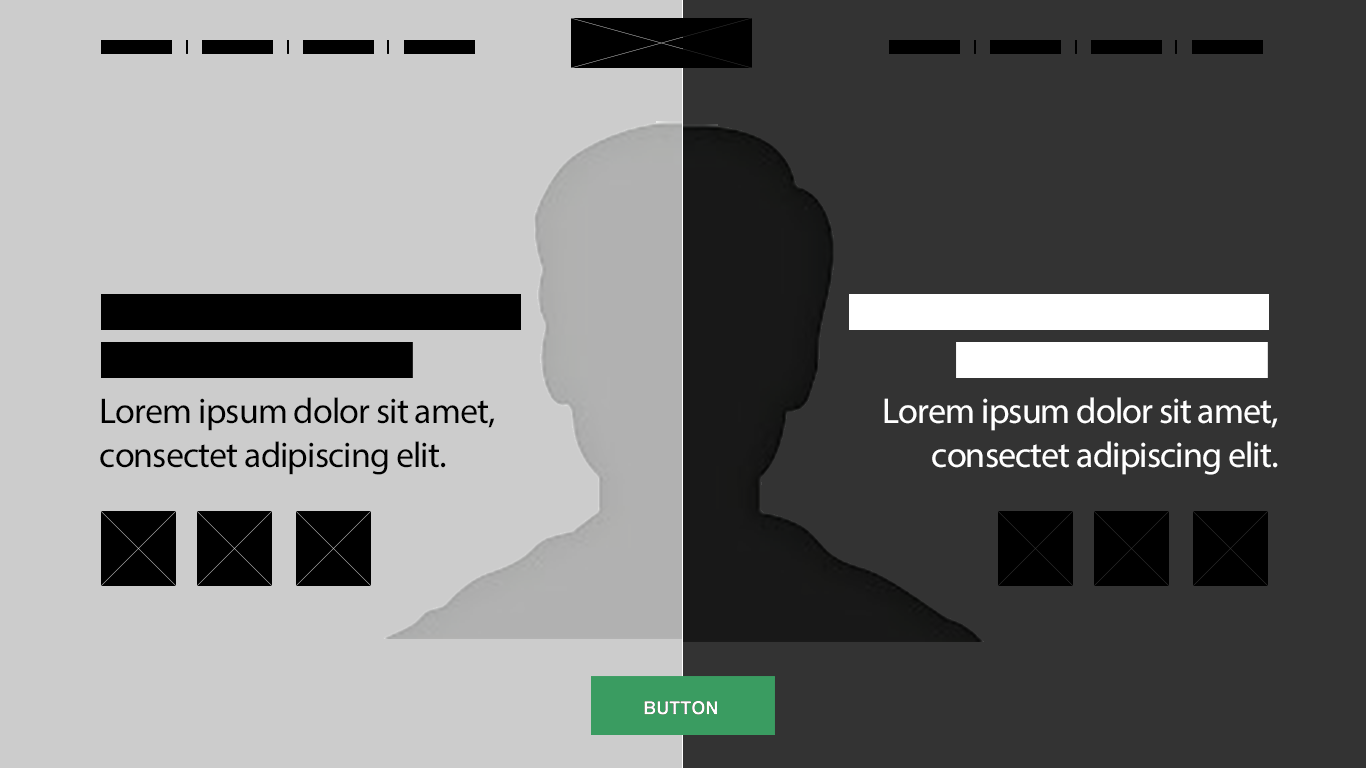
<style>
.page{position:relative;width:1366px;height:768px;background:#333333}
.page>*{position:absolute;margin:0}
.t1{font:36px "MyriadPro-Regular";letter-spacing:-0.025em;color:#000000}
.t2{font:36px "MyriadPro-Regular";letter-spacing:-0.025em;color:#ffffff}
</style>
<div class="page">
<p class="t1" style="left:100px;top:397px;width:395px;height:78px">Lorem ipsum dolor sit amet, consectet adipiscing elit.</p>
<p class="t2" style="left:884px;top:397px;width:394px;height:78px;text-align:right">Lorem ipsum dolor sit amet, consectet adipiscing elit.</p>
</div>
